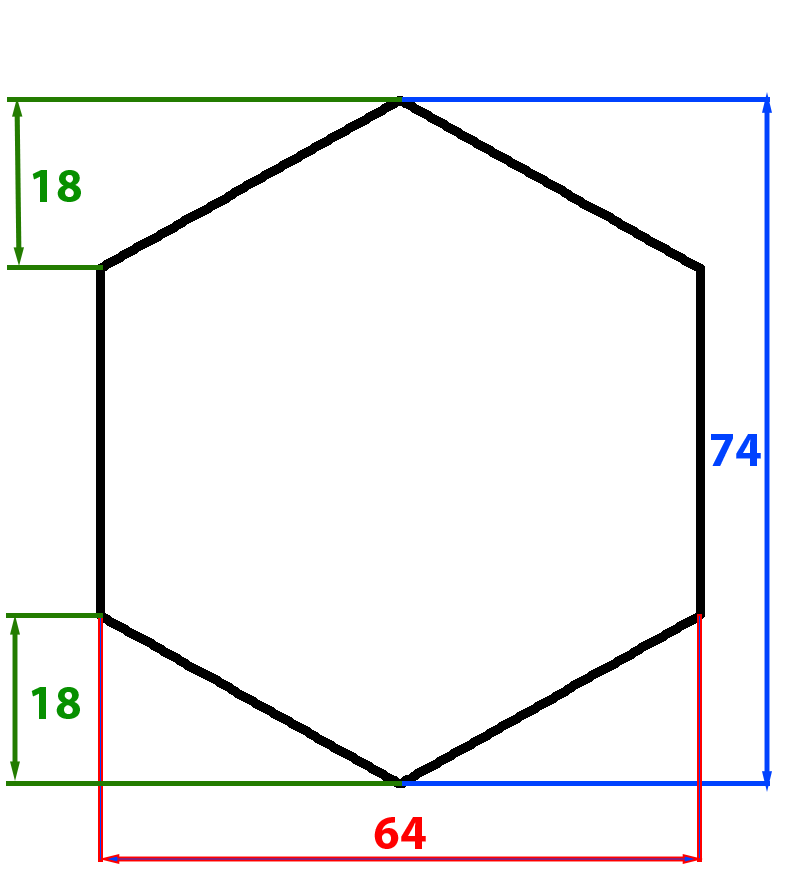
<style>
.page{position:relative;width:800px;height:884px;background:#ffffff}
.page>*{position:absolute;margin:0}
.t1{font:48px "MyriadPro-Bold";color:#079000}
.t2{font:48px "MyriadPro-Bold";color:#0042ff}
.t3{font:48px "MyriadPro-Bold";color:#ff0000}
</style>
<div class="page">
<p class="t1" style="left:32px;top:170px;width:49px;height:32px">18</p>
<p class="t2" style="left:711px;top:434px;width:50px;height:32px">74</p>
<p class="t1" style="left:31px;top:687px;width:49px;height:32px">18</p>
<p class="t3" style="left:374px;top:817px;width:52px;height:32px">64</p>
</div>
